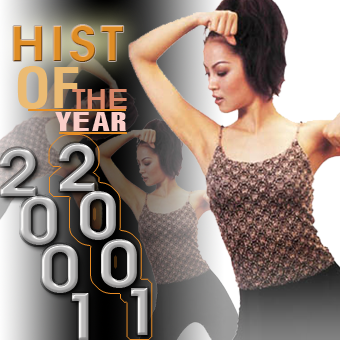
<style>
.page{position:relative;width:340px;height:340px}
.page>*{position:absolute;margin:0}
.t1{font:48px "VNI-Avo-Bold";letter-spacing:0.075em;color:#df8d25;scale:1.1 1}
.t2{font:54.8px "VNI-Helve-Condense-Bold";color:#ebbb73;scale:1.1 1}
.t3{font:26px "VNI-Avo-Bold";color:#d98668;scale:1.22 1}
.t4{font:25.9px "VNI-Swiss-Condense";color:#fbcec8;scale:1.57 1}
.t5{font:62.2px/48px "VNI-Avo-Bold";scale:1.16 1}
</style>
<div class="page">
<p class="t1" style="left:13px;top:25px;width:111px;height:37px">HIST</p>
<p class="t2" style="left:17px;top:66px;width:62px;height:43px">OF</p>
<p class="t3" style="left:72px;top:89px;width:55px;height:20px">THE</p>
<p class="t4" style="left:55px;top:112px;width:71px;height:19px">YEAR</p>
<p class="t5" style="left:59px;top:143px;width:89px;height:192px">2<br> 0<br>  0<br>   1</p>
</div>
